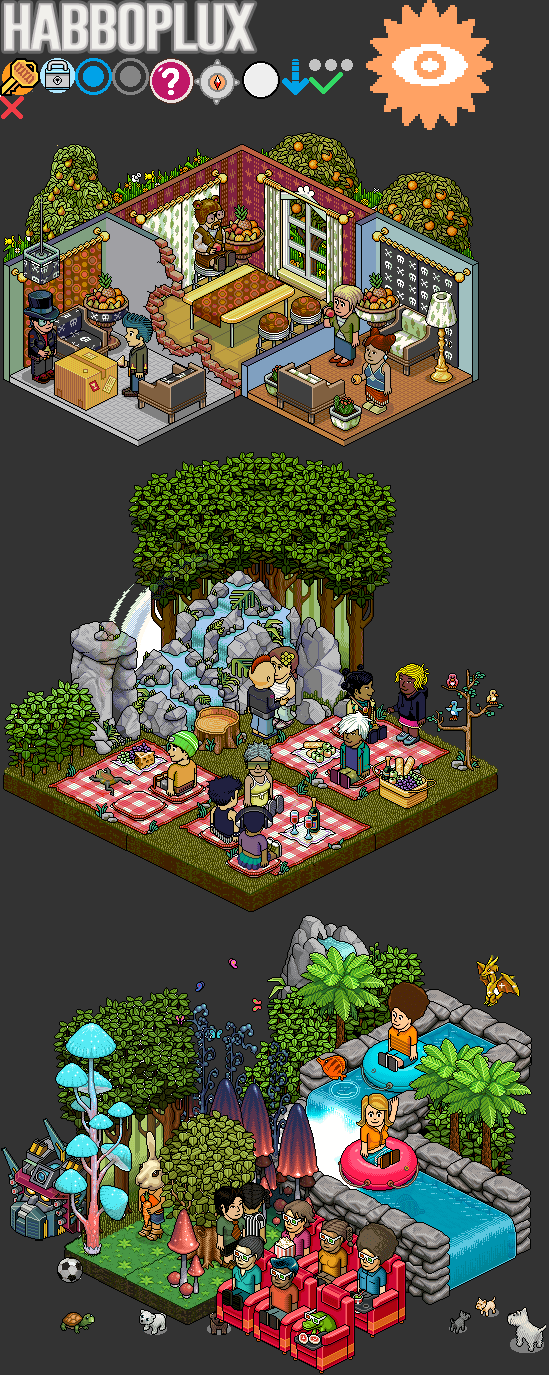
<style>
.page{position:relative;width:549px;height:1375px;background:#333333}
.page>*{position:absolute;margin:0}
.t1{font:48.7px "Gobold";letter-spacing:-0.075em;color:#f1f0ec;font-weight:bold;scale:1.27 1}
</style>
<div class="page">
<p class="t1" style="left:4px;top:2px;width:251px;height:50px">HABBOPLUX</p>
</div>
